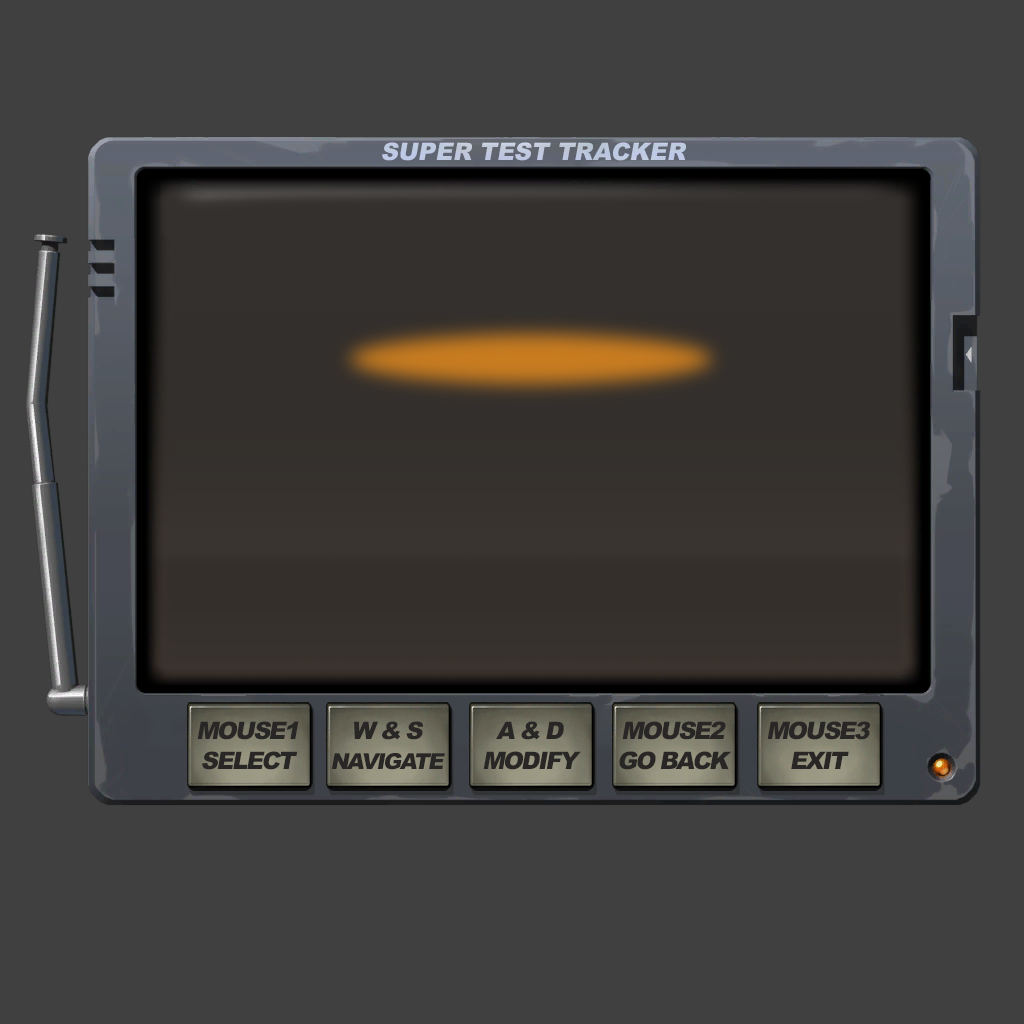
<style>
.page{position:relative;width:1024px;height:1024px;background:#404040}
.page>*{position:absolute;margin:0}
.t1{font:24px "Arial-Black";color:#becae0;font-style:italic}
.t2{font:24px/30px "Arial-Black";letter-spacing:-0.08em;color:#292626;font-style:italic}
.t3{font:22px/30px "Arial-Black";letter-spacing:-0.08em;color:#292626;font-style:italic}
</style>
<div class="page">
<p class="t1" style="left:382px;top:142px;width:304px;height:19px">SUPER TEST TRACKER</p>
<p class="t2" style="left:197px;top:721px;width:102px;height:49px;text-align:center">MOUSE1<br>SELECT</p>
<p class="t3" style="left:332px;top:721px;width:113px;height:49px;text-align:center"><span class="t2">W &amp; S<br></span>NAVIGATE</p>
<p class="t2" style="left:483px;top:721px;width:98px;height:49px;text-align:center">A &amp; D<br>MODIFY</p>
<p class="t2" style="left:619px;top:721px;width:113px;height:49px;text-align:center">MOUSE2<br>GO BACK</p>
<p class="t2" style="left:767px;top:721px;width:103px;height:48px;text-align:center">MOUSE3<br>EXIT</p>
</div>
